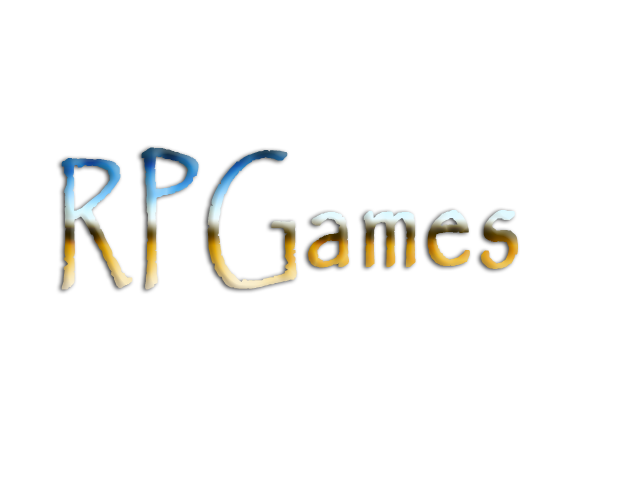
<style>
.page{position:relative;width:640px;height:480px;background:#ffffff}
.page>*{position:absolute;margin:0}
.t1{font:142.5px "Papyrus-Regular";letter-spacing:0.025em;font-weight:bold;scale:0.67 1}
</style>
<div class="page">
<p class="t1" style="left:61px;top:147px;width:457px;height:143px">RPGames</p>
</div>
